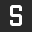
<style>
.page{position:relative;width:32px;height:32px;background:#2a2a2a}
.page>*{position:absolute;margin:0}
.t1{font:24px "Manteka";letter-spacing:0.1em;color:#ffffff;text-transform:uppercase}
</style>
<div class="page">
<p class="t1" style="left:10px;top:5px;width:12px;height:21px">S</p>
</div>
